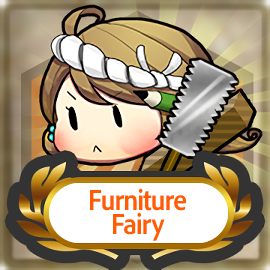
<style>
.page{position:relative;width:270px;height:270px}
.page>*{position:absolute;margin:0}
.t1{font:30px/24px "AdobeClean-Bold";letter-spacing:-0.04em;color:#ff5d00;scale:0.9 1}
</style>
<div class="page">
<p class="t1" style="left:90px;top:188px;width:96px;height:53px;text-align:center">Furniture<br>Fairy</p>
</div>
